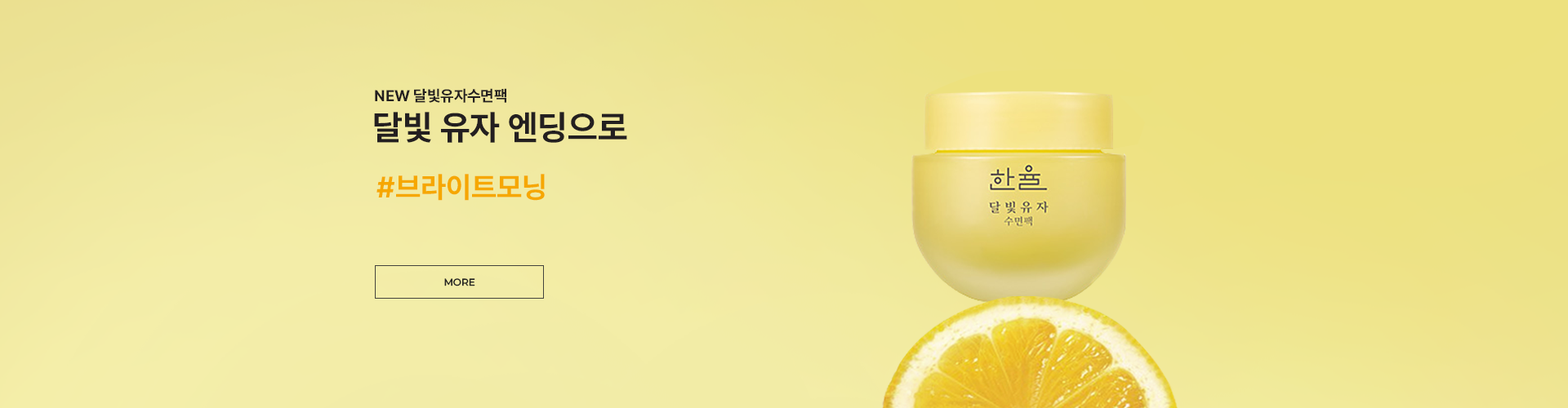
<style>
.page{position:relative;width:1568px;height:408px}
.page>*{position:absolute;margin:0}
.t1{font:15.5px "Pretendard-Bold";color:#231f20}
.t2{font:34.6px "Pretendard-Bold";color:#231f20}
.t3{font:29.3px "Pretendard-Bold";color:#f6a700}
.t4{font:9.8px "MontserratRoman-Medium";color:#252523}
</style>
<div class="page">
<p class="t1" style="left:375px;top:88px;width:131px;height:15px">NEW 달빛유자수면팩</p>
<p class="t2" style="left:374px;top:112px;width:253px;height:31px">달빛 유자 엔딩으로</p>
<p class="t3" style="left:376px;top:174px;width:169px;height:27px">#브라이트모닝</p>
<p class="t4" style="left:444px;top:278px;width:31px;height:9px">MORE</p>
</div>
